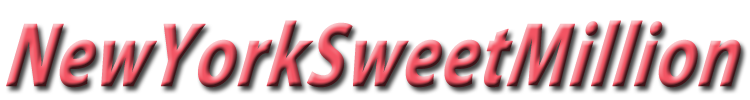
<style>
.page{position:relative;width:750px;height:100px;background:#ffffff}
.page>*{position:absolute;margin:0}
.t1{font:92px "MyriadPro-BoldIt";font-weight:bold;font-style:italic;scale:0.79 1}
</style>
<div class="page">
<p class="t1" style="left:6px;top:20px;width:735px;height:68px">NewYorkSweetMillion</p>
</div>
